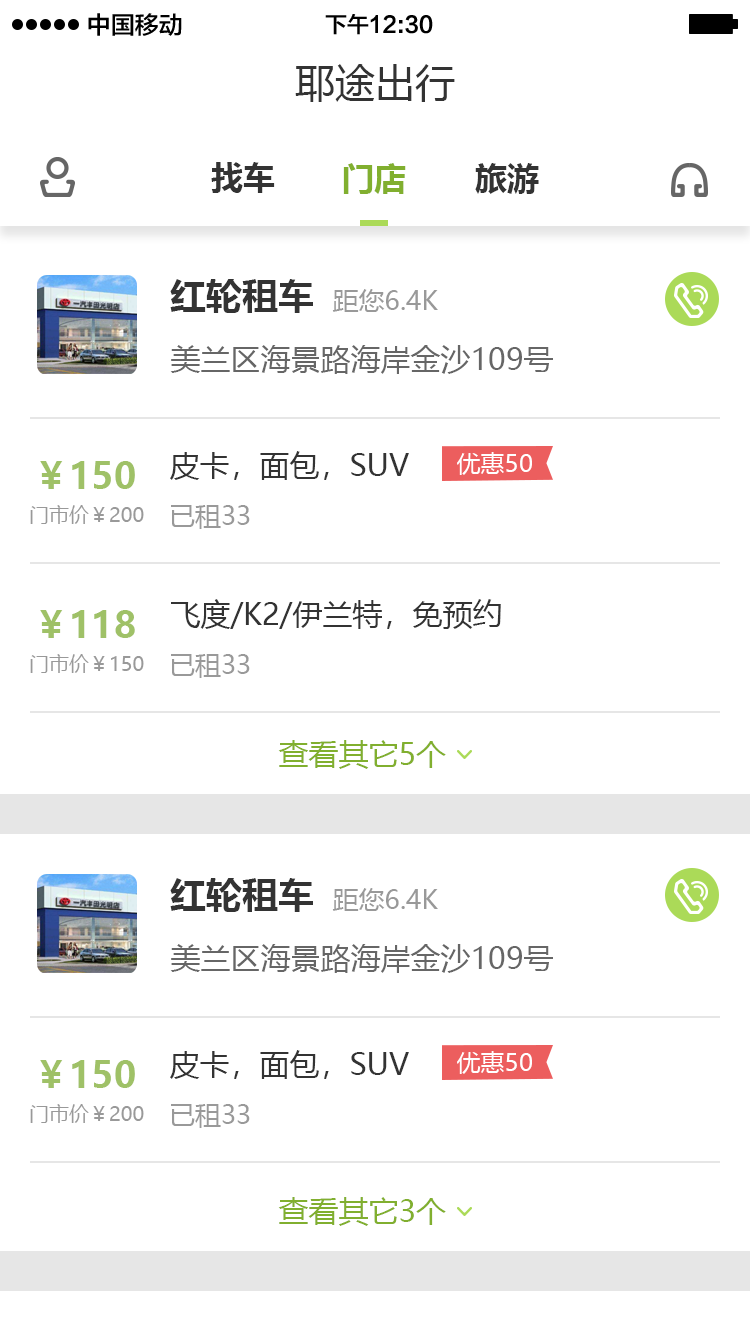
<style>
.page{position:relative;width:750px;height:1334px;background:#ffffff}
.page>*{position:absolute;margin:0}
.t1{font:24px "FZLTZHK--GBK1-0";color:#000000}
.t2{font:22px "FZLTZHK--GBK1-0";color:#000000}
.t3{font:40px "MicrosoftYaHei";color:#333333}
.t4{font:32px "MicrosoftYaHei-Bold";color:#333333}
.t5{font:32px "MicrosoftYaHei-Bold";color:#81af2f}
.t6{font:36px "MicrosoftYaHei-Bold";color:#333333}
.t7{font:26px "MicrosoftYaHei";color:#999999}
.t8{font:30px "MicrosoftYaHei";color:#666666}
.t9{font:36px "MicrosoftYaHei-Bold";color:#9fc167}
.t10{font:30px "MicrosoftYaHei";color:#333333}
.t11{font:24px "MicrosoftYaHei";color:#ffffff}
.t12{font:20px "MicrosoftYaHei";color:#999999}
.t13{font:30px "MicrosoftYaHei";color:#81af2f}
</style>
<div class="page">
<p class="t1" style="left:88px;top:13px;width:94px;height:23px">中国移动</p>
<p class="t2" style="left:325px;top:14px;width:108px;height:21px">下午12:30</p>
<p class="t3" style="left:295px;top:64px;width:160px;height:38px">耶途出行</p>
<p class="t4" style="left:211px;top:162px;width:64px;height:31px">找车</p>
<p class="t5" style="left:343px;top:163px;width:63px;height:31px">门店</p>
<p class="t4" style="left:475px;top:163px;width:64px;height:31px">旅游</p>
<p class="t6" style="left:170px;top:279px;width:143px;height:34px">红轮租车</p>
<p class="t7" style="left:332px;top:289px;width:106px;height:23px">距您6.4K</p>
<p class="t8" style="left:170px;top:345px;width:383px;height:29px">美兰区海景路海岸金沙109号</p>
<p class="t9" style="left:40px;top:461px;width:95px;height:28px">￥150</p>
<p class="t10" style="left:170px;top:451px;width:239px;height:29px">皮卡，面包，SUV</p>
<p class="t11" style="left:457px;top:452px;width:75px;height:23px">优惠50</p>
<p class="t12" style="left:30px;top:505px;width:114px;height:19px">门市价￥200</p>
<p class="t7" style="left:171px;top:505px;width:79px;height:24px">已租33</p>
<p class="t10" style="left:171px;top:599px;width:330px;height:30px">飞度/K2/伊兰特，免预约</p>
<p class="t9" style="left:40px;top:610px;width:95px;height:28px">￥118</p>
<p class="t12" style="left:30px;top:654px;width:114px;height:19px">门市价￥150</p>
<p class="t7" style="left:171px;top:654px;width:79px;height:24px">已租33</p>
<p class="t13" style="left:278px;top:740px;width:168px;height:29px">查看其它5个</p>
<p class="t6" style="left:170px;top:878px;width:143px;height:34px">红轮租车</p>
<p class="t7" style="left:332px;top:888px;width:106px;height:23px">距您6.4K</p>
<p class="t8" style="left:170px;top:944px;width:383px;height:29px">美兰区海景路海岸金沙109号</p>
<p class="t9" style="left:40px;top:1060px;width:95px;height:28px">￥150</p>
<p class="t10" style="left:170px;top:1050px;width:239px;height:29px">皮卡，面包，SUV</p>
<p class="t11" style="left:457px;top:1051px;width:75px;height:23px">优惠50</p>
<p class="t12" style="left:30px;top:1104px;width:114px;height:19px">门市价￥200</p>
<p class="t7" style="left:171px;top:1104px;width:79px;height:24px">已租33</p>
<p class="t13" style="left:278px;top:1197px;width:168px;height:29px">查看其它3个</p>
</div>
